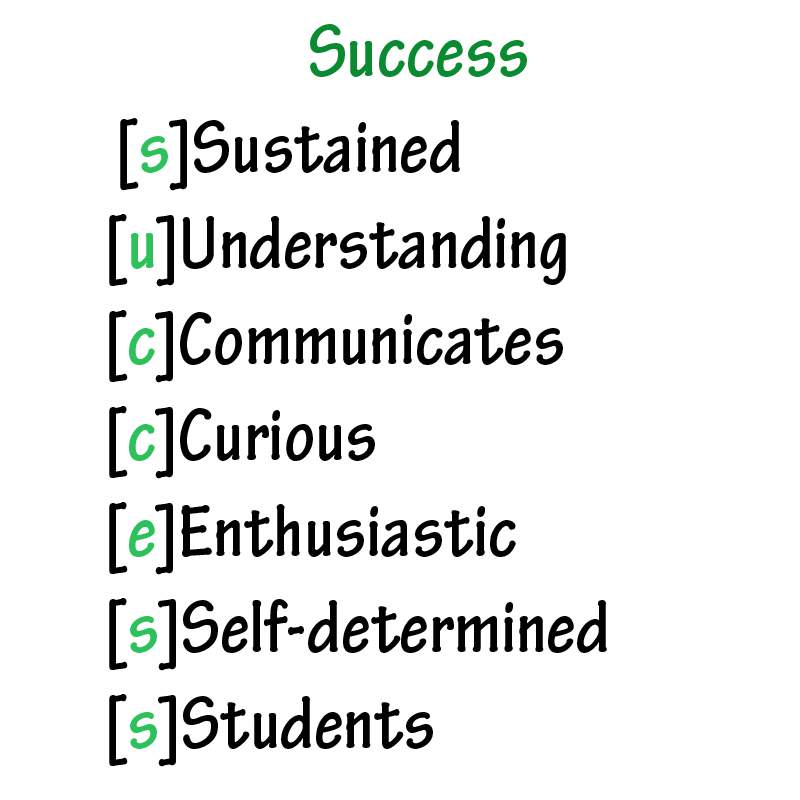
<style>
.page{position:relative;width:800px;height:800px;background:#ffffff}
.page>*{position:absolute;margin:0}
.t1{font:80px "TektonPro-BoldCond";color:#000100}
.t2{font:80px "TektonPro-BoldCond";color:#f181a1}
.t3{font:80px "TektonPro-BoldCond";color:#0a8a31}
.t4{font:80px "TektonPro-BoldCond";color:#2cc15a}
</style>
<div class="page">
<p class="t1" style="left:109px;top:24px;width:498px;height:743px"><span class="t2">      </span><span class="t3">            Success<br></span> [<span class="t4">s</span>]Sustained<br>[<span class="t4">u</span>]Understanding<br>[<span class="t4">c</span>]Communicates<br>[<span class="t4">c</span>]Curious<br>[<span class="t4">e</span>]Enthusiastic<br>[<span class="t4">s</span>]Self-determined<br>[<span class="t4">s</span>]Students</p>
</div>
